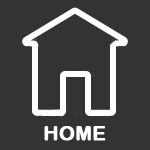
<style>
.page{position:relative;width:150px;height:150px;background:#333333}
.page>*{position:absolute;margin:0}
.t1{font:20px "ArialRoundedMTBold";letter-spacing:-0.005em;color:#ffffff;text-transform:uppercase;font-weight:bold}
</style>
<div class="page">
<p class="t1" style="left:44px;top:126px;width:62px;height:15px">Home</p>
</div>
